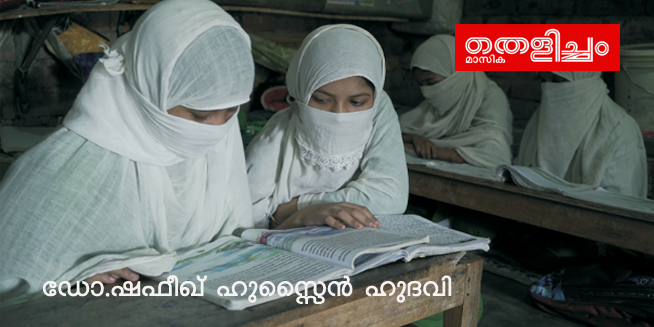
<style>
.page{position:relative;width:654px;height:327px}
.page>*{position:absolute;margin:0}
.t1{font:33.3px "ML-KV-Sakkeena-Medium";color:#f6f2f2}
</style>
<div class="page">
<p class="t1" style="left:43px;top:275px;width:409px;height:29px">tUm.j-^o-Jv lp-ssÊ³ lpZhn</p>
</div>
